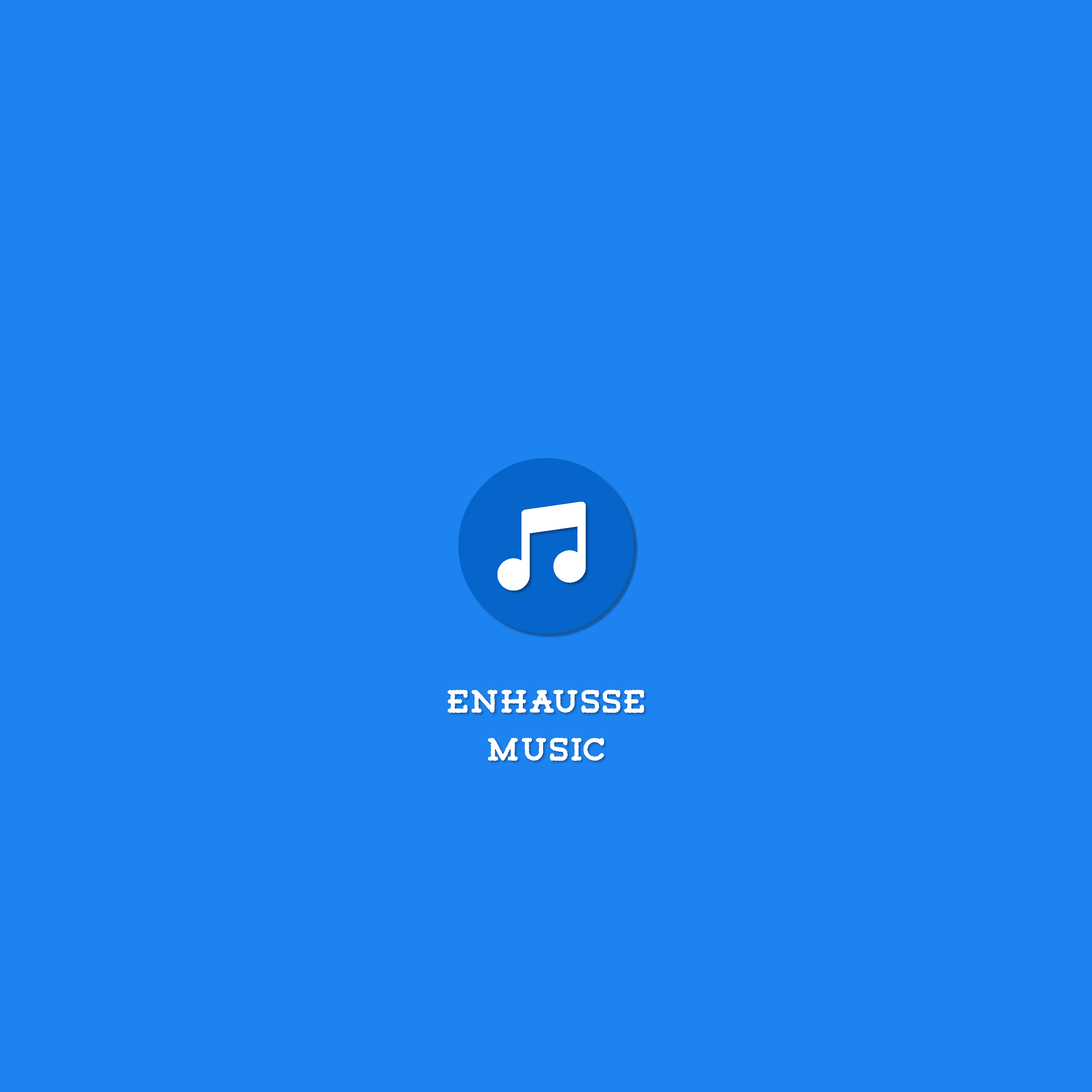
<style>
.page{position:relative;width:1092px;height:1092px;background:#1c83f1}
.page>*{position:absolute;margin:0}
.t1{font:40px "Tigreal-Rough";color:#ffffff}
</style>
<div class="page">
<p class="t1" style="left:447px;top:690px;width:197px;height:71px;text-align:center">enhausse<br>music</p>
</div>
